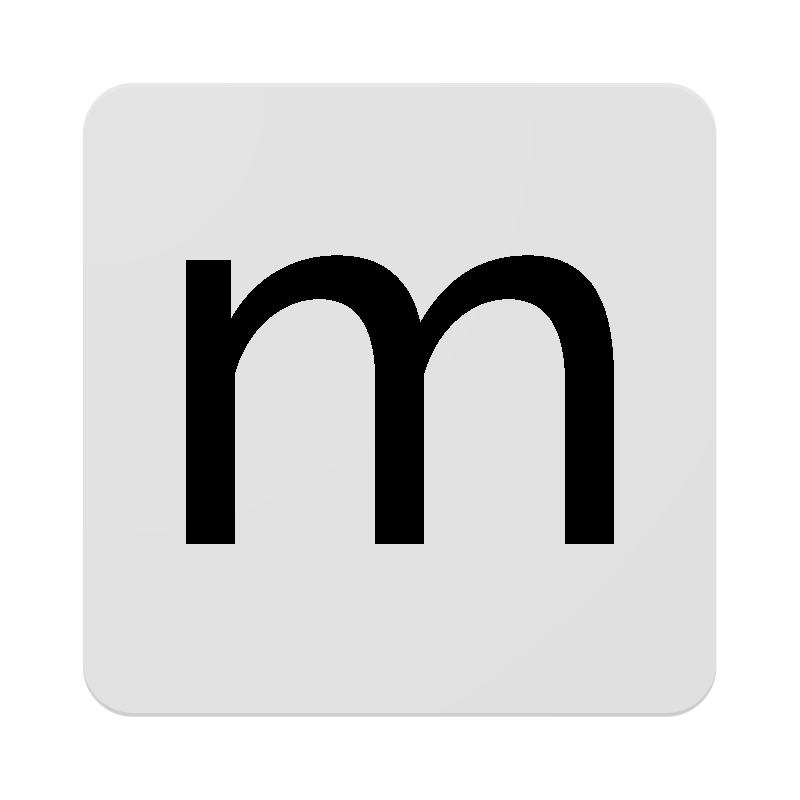
<style>
.page{position:relative;width:800px;height:800px;background:#ffffff}
.page>*{position:absolute;margin:0}
.t1{font:541.7px "Raleway-Medium";color:#000000}
</style>
<div class="page">
<p class="t1" style="left:186px;top:255px;width:428px;height:289px">m</p>
</div>
